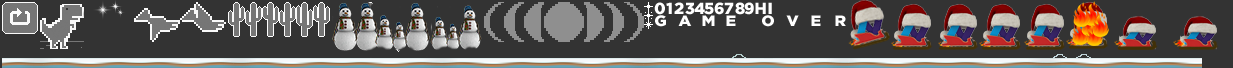
<style>
.page{position:relative;width:1233px;height:68px;background:#333333}
.page>*{position:absolute;margin:0}
.t1{font:16px "GothamBlack";color:#ffffff}
.t2{font:15px "GothamBlack";color:#ffffff;scale:1.07 1}
</style>
<div class="page">
<p class="t1" style="left:654px;top:2px;width:11px;height:13px">0</p>
<p class="t1" style="left:666px;top:2px;width:6px;height:12px">1</p>
<p class="t1" style="left:674px;top:2px;width:10px;height:12px">2</p>
<p class="t1" style="left:685px;top:2px;width:10px;height:13px">3</p>
<p class="t1" style="left:694px;top:2px;width:11px;height:12px">4</p>
<p class="t1" style="left:704px;top:2px;width:10px;height:13px">5</p>
<p class="t1" style="left:714px;top:2px;width:10px;height:13px">6</p>
<p class="t1" style="left:724px;top:2px;width:10px;height:12px">7</p>
<p class="t1" style="left:735px;top:2px;width:10px;height:13px">8</p>
<p class="t1" style="left:744px;top:2px;width:10px;height:13px">9</p>
<p class="t1" style="left:755px;top:2px;width:11px;height:12px">H</p>
<p class="t1" style="left:768px;top:2px;width:4px;height:12px">I</p>
<p class="t2" style="left:655px;top:15px;width:11px;height:12px">G</p>
<p class="t2" style="left:678px;top:15px;width:14px;height:11px">A</p>
<p class="t2" style="left:702px;top:15px;width:13px;height:11px">M</p>
<p class="t2" style="left:726px;top:15px;width:10px;height:11px">E</p>
<p class="t2" style="left:762px;top:15px;width:12px;height:12px">O</p>
<p class="t2" style="left:786px;top:15px;width:13px;height:11px">V</p>
<p class="t2" style="left:811px;top:15px;width:10px;height:11px">E</p>
<p class="t2" style="left:835px;top:15px;width:11px;height:11px">R</p>
</div>
